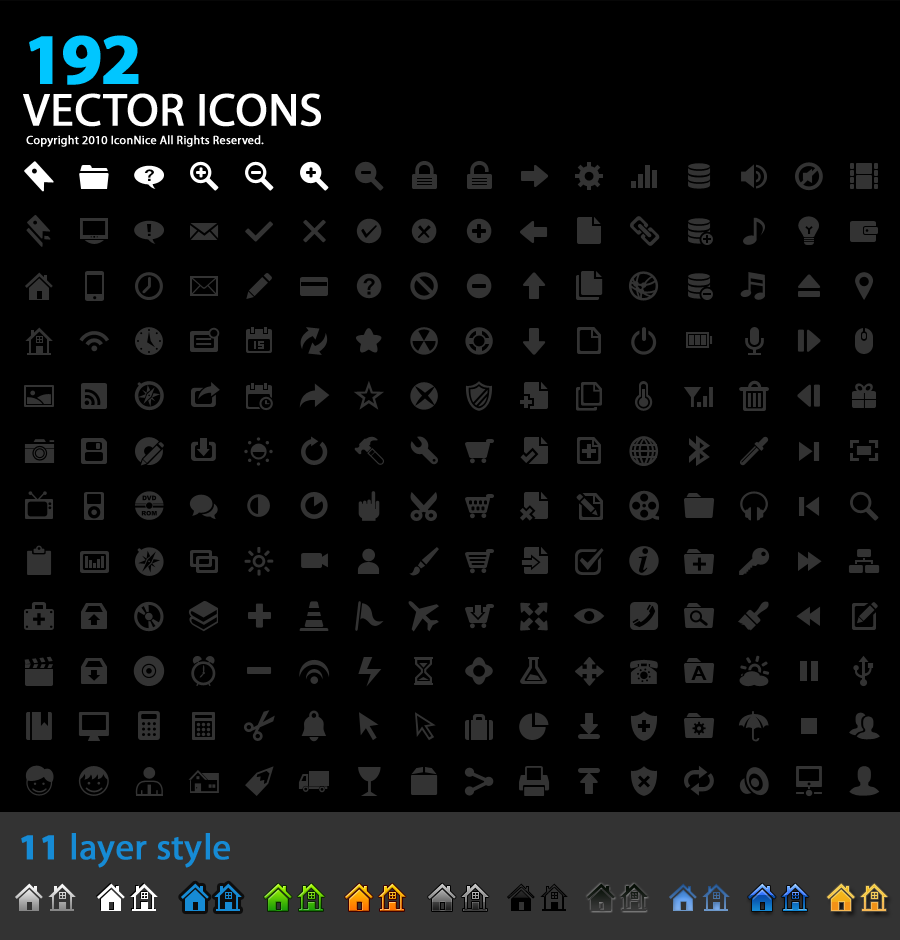
<style>
.page{position:relative;width:900px;height:940px;background:#000000}
.page>*{position:absolute;margin:0}
.t1{font:46px/42px "MyriadPro-Regular";color:#ffffff;text-transform:uppercase;font-weight:bold}
.t2{font:72px/42px "MyriadPro-Bold";letter-spacing:-0.05em;color:#00c6ff;text-transform:uppercase;font-weight:bold}
.t3{font:12px "MyriadPro-Regular";color:#ffffff;font-weight:bold}
.t4{font:36.5px "MyriadPro-Regular";color:#168bd5;font-weight:bold}
.t5{font:36.5px "MyriadPro-Bold";color:#168bd5;font-weight:bold}
</style>
<div class="page">
<p class="t1" style="left:23px;top:35px;width:298px;height:92px"><span class="t2">192 <br></span>Vector Icons</p>
<p class="t3" style="left:26px;top:135px;width:238px;height:12px">Copyright 2010 IconNice All Rights Reserved.</p>
<p class="t4" style="left:21px;top:833px;width:209px;height:35px"><span class="t5">11</span> layer style</p>
</div>
